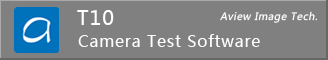
<style>
.page{position:relative;width:328px;height:60px;background:#808080}
.page>*{position:absolute;margin:0}
.t1{font:20px "MicrosoftYaHei";letter-spacing:0.05em;color:#ffffff}
.t2{font:10px "MicrosoftYaHei";letter-spacing:0.05em;color:#ffffff;font-style:italic}
.t3{font:16px "MicrosoftYaHei";letter-spacing:0.05em;color:#ffffff}
</style>
<div class="page">
<p class="t1" style="left:77px;top:10px;width:37px;height:15px">T10</p>
<p class="t2" style="left:220px;top:11px;width:98px;height:12px">Aview Image Tech.</p>
<p class="t3" style="left:78px;top:34px;width:182px;height:13px">Camera Test Software</p>
</div>
